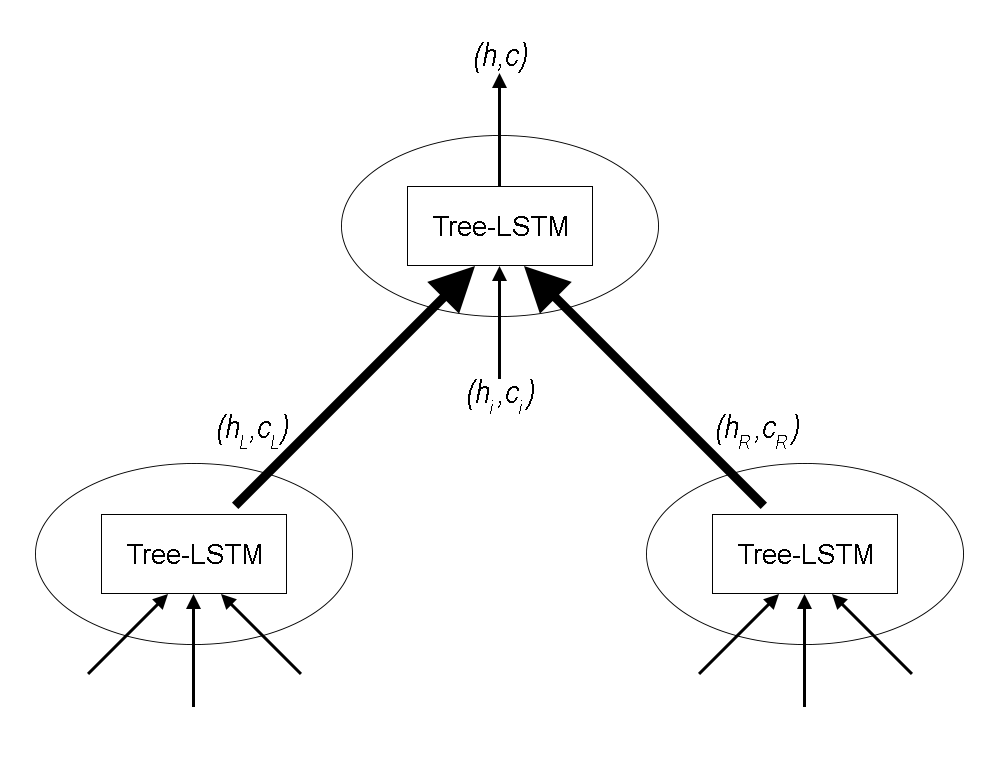
<style>
.page{position:relative;width:1000px;height:757px;background:#ffffff}
.page>*{position:absolute;margin:0}
.t1{font:33.3px "ArialNarrow";color:#000000;font-style:italic}
.t2{font:27.8px "ArialMT";color:#000000}
</style>
<div class="page">
<p class="t1" style="left:475px;top:42px;width:52px;height:31px">(h,c)</p>
<p class="t2" style="left:433px;top:216px;width:134px;height:20px">Tree-LSTM</p>
<p class="t1" style="left:468px;top:379px;width:66px;height:35px">(hi ,ci )</p>
<p class="t1" style="left:218px;top:414px;width:70px;height:35px">(hL,cL)</p>
<p class="t1" style="left:717px;top:414px;width:82px;height:35px">(hR ,cR )</p>
<p class="t2" style="left:127px;top:544px;width:134px;height:20px">Tree-LSTM</p>
<p class="t2" style="left:738px;top:544px;width:134px;height:20px">Tree-LSTM</p>
</div>
